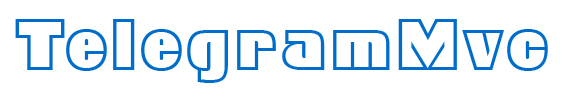
<style>
.page{position:relative;width:564px;height:96px;background:#ffffff}
.page>*{position:absolute;margin:0}
.t1{font:72px "G2Geometric885BT-RegularD";letter-spacing:0.01em;color:#006dca}
</style>
<div class="page">
<p class="t1" style="left:15px;top:19px;width:533px;height:64px">TelegramMvc</p>
</div>
